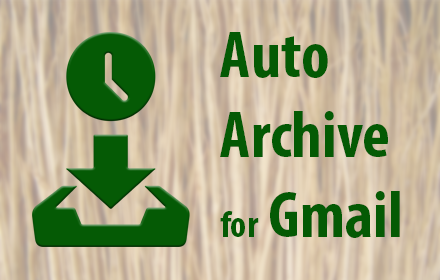
<style>
.page{position:relative;width:440px;height:280px}
.page>*{position:absolute;margin:0}
.t1{font:66.7px "MyriadPro-BoldCond";color:#045a04}
.t2{font:37.5px "MyriadPro-BoldCond";color:#045a04}
</style>
<div class="page">
<p class="t1" style="left:220px;top:32px;width:180px;height:206px">Auto<br>Archive<br><span class="t2">for</span> Gmail</p>
</div>
